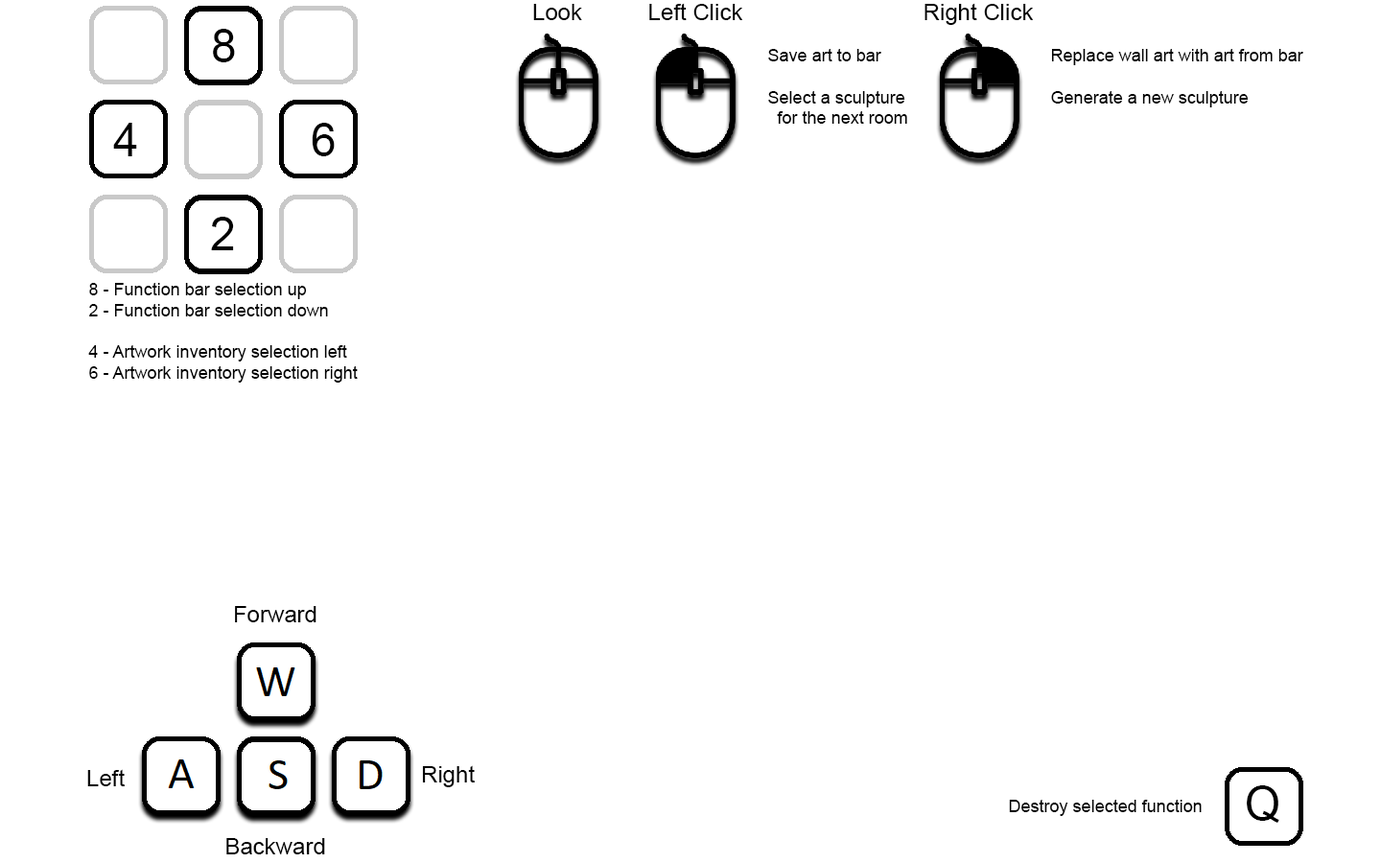
<style>
.page{position:relative;width:1381px;height:863px;background:#ffffff}
.page>*{position:absolute;margin:0}
.t1{font:23px "ArialMT";color:#000000}
.t2{font:46px "ArialMT";color:#000000}
.t3{font:17.3px "ArialMT";color:#000000}
</style>
<div class="page">
<p class="t1" style="left:533px;top:4px;width:49px;height:16px">Look</p>
<p class="t1" style="left:649px;top:3px;width:94px;height:17px">Left Click</p>
<p class="t1" style="left:925px;top:3px;width:109px;height:22px">Right Click</p>
<p class="t2" style="left:213px;top:29px;width:22px;height:33px">8</p>
<p class="t3" style="left:768px;top:49px;width:139px;height:75px">Save art to bar<br><br>Select a sculpture <br>  for the next room</p>
<p class="t3" style="left:1051px;top:49px;width:253px;height:58px">Replace wall art with art from bar<br><br>Generate a new sculpture</p>
<p class="t2" style="left:113px;top:123px;width:24px;height:33px">4</p>
<p class="t2" style="left:312px;top:123px;width:23px;height:33px">6</p>
<p class="t2" style="left:211px;top:217px;width:23px;height:33px">2</p>
<p class="t3" style="left:88px;top:283px;width:270px;height:100px">8 - Function bar selection up<br>2 - Function bar selection down<br><br>4 - Artwork inventory selection left<br>6 - Artwork inventory selection right</p>
<p class="t1" style="left:235px;top:606px;width:82px;height:17px">Forward</p>
<p class="t1" style="left:87px;top:769px;width:38px;height:18px">Left</p>
<p class="t1" style="left:422px;top:765px;width:53px;height:23px">Right</p>
<p class="t2" style="left:1247px;top:786px;width:33px;height:37px">Q</p>
<p class="t3" style="left:1009px;top:800px;width:193px;height:16px">Destroy selected function</p>
<p class="t1" style="left:226px;top:838px;width:99px;height:17px">Backward</p>
</div>
